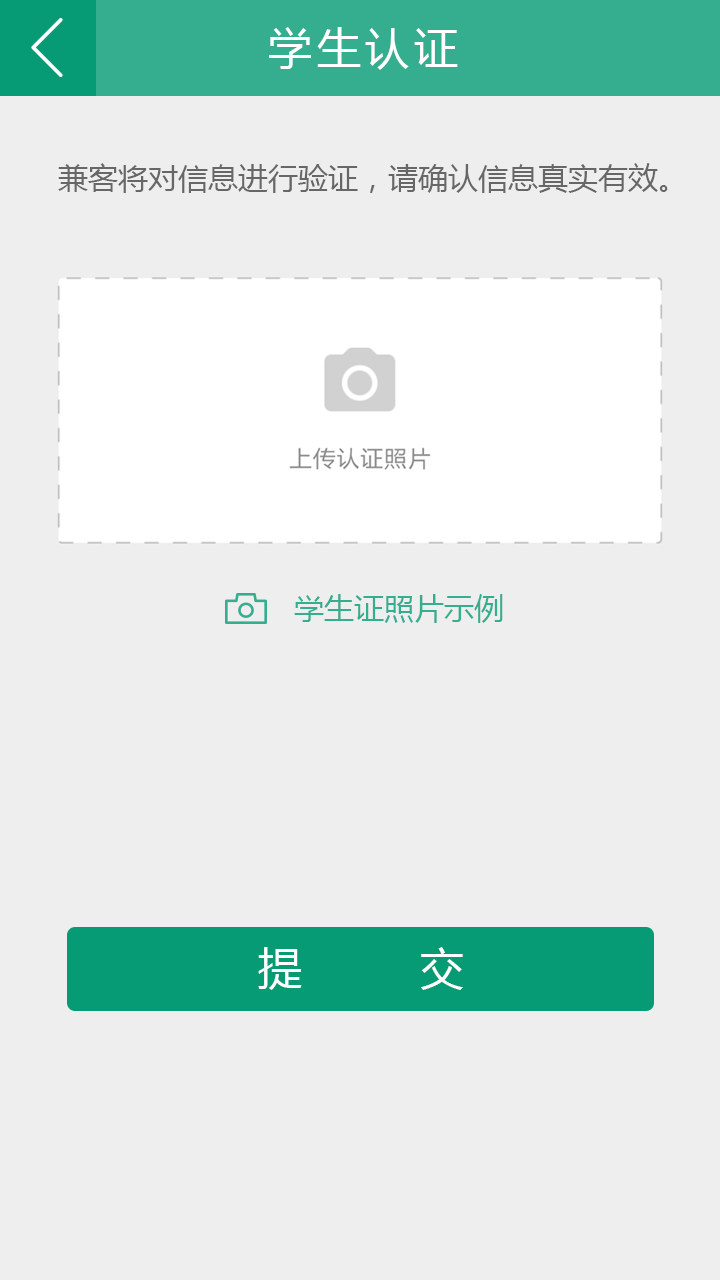
<style>
.page{position:relative;width:720px;height:1280px;background:#eeeeee}
.page>*{position:absolute;margin:0}
.t1{font:44px "MicrosoftYaHei";letter-spacing:0.1em;color:#ffffff}
.t2{font:30px "MicrosoftYaHei";color:#676767}
.t3{font:30px "MicrosoftYaHei";color:#35ae8f}
.t4{font:44px "MicrosoftYaHei";letter-spacing:0.2em;color:#ffffff}
</style>
<div class="page">
<p class="t1" style="left:269px;top:27px;width:189px;height:43px">学生认证</p>
<p class="t2" style="left:58px;top:163px;width:610px;height:30px">兼客将对信息进行验证，请确认信息真实有效。</p>
<p class="t3" style="left:294px;top:594px;width:209px;height:29px">学生证照片示例</p>
<p class="t4" style="left:258px;top:947px;width:205px;height:43px">提     交</p>
</div>
